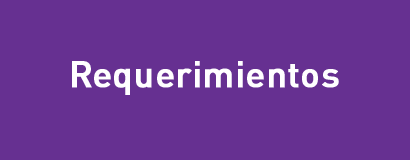
<style>
.page{position:relative;width:410px;height:160px;background:#663091}
.page>*{position:absolute;margin:0}
.t1{font:36px "DINPro-Medium";color:#ffffff;font-weight:bold}
</style>
<div class="page">
<p class="t1" style="left:72px;top:61px;width:267px;height:34px">Requerimientos</p>
</div>
